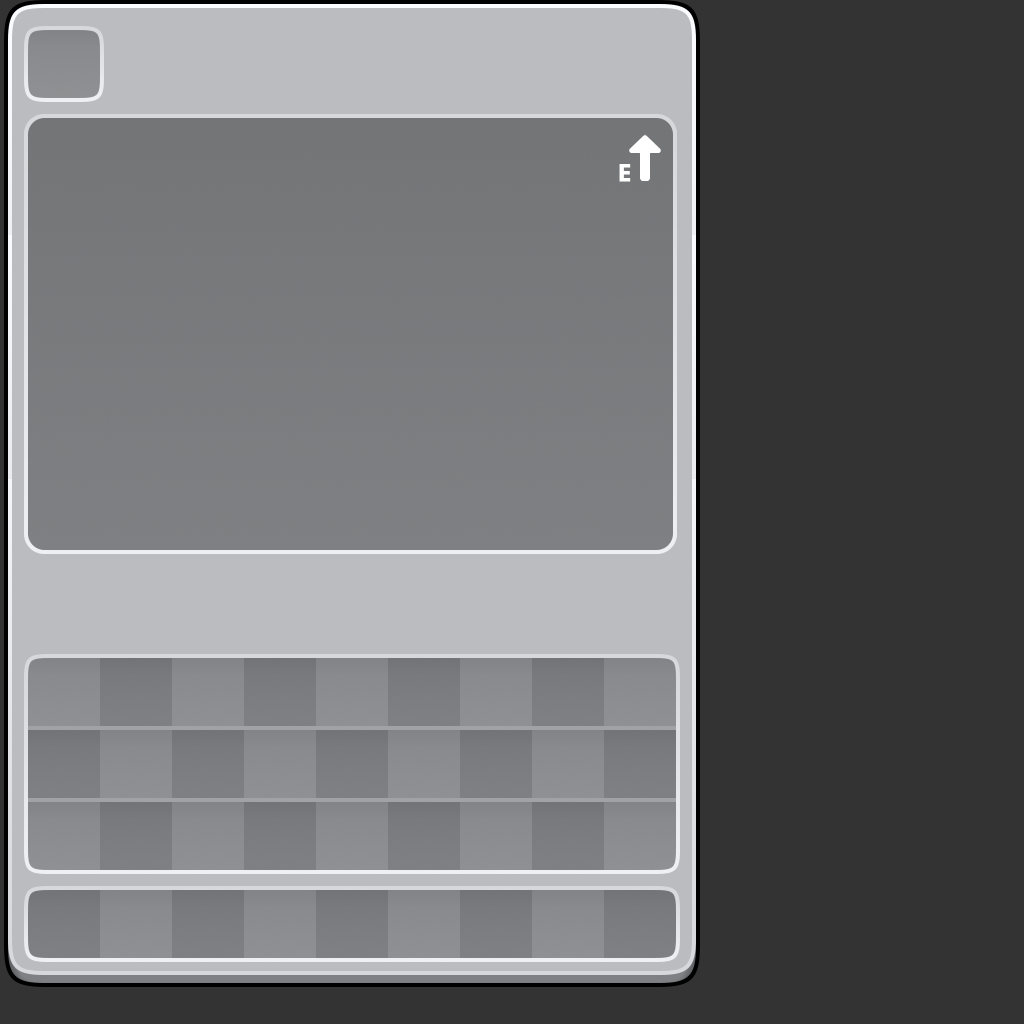
<style>
.page{position:relative;width:1024px;height:1024px;background:#333333}
.page>*{position:absolute;margin:0}
.t1{font:24px "NotoSans-Bold";color:#ffffff;font-weight:bold}
</style>
<div class="page">
<p class="t1" style="left:619px;top:164px;width:12px;height:18px">E</p>
</div>
